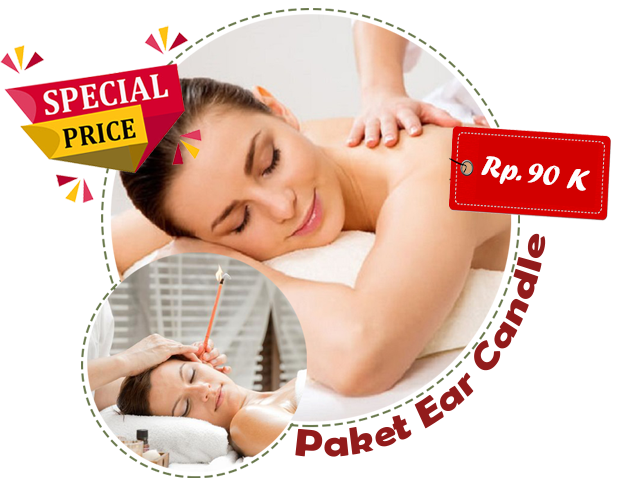
<style>
.page{position:relative;width:640px;height:480px;background:#ffffff}
.page>*{position:absolute;margin:0}
.t1{font:30.9px "ForteMT";color:#fefefe}
.t2{font:37.9px "BerlinSansFBDemi-Bold";color:#921b1b}
</style>
<div class="page">
<p class="t1" style="left:481px;top:156px;width:109px;height:35px;rotate:9deg">Rp. 90 K</p>
<p class="t2" style="left:295px;top:233px;width:251px;height:224px;rotate:-41deg">Paket Ear Candle</p>
</div>
